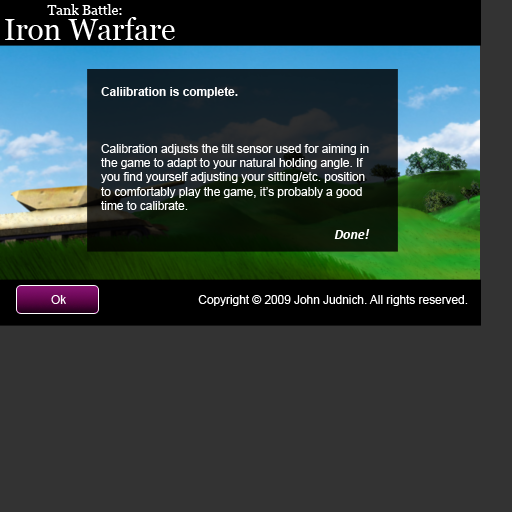
<style>
.page{position:relative;width:512px;height:512px;background:#333333}
.page>*{position:absolute;margin:0}
.t1{font:13.8px "Georgia";color:#ffffff}
.t2{font:29.6px "Georgia";color:#ffffff}
.t3{font:11.9px "ArialMT";color:#fefefe}
.t4{font:11.9px "Arial-BoldMT";color:#fefefe}
.t5{font:5.9px "Georgia";color:#000000}
.t6{font:13.8px "Calibri-BoldItalic";color:#fefefe}
.t7{font:11.9px "ArialMT";color:#ffffff}
</style>
<div class="page">
<p class="t1" style="left:47px;top:4px;width:75px;height:11px">Tank Battle:</p>
<p class="t2" style="left:5px;top:17px;width:170px;height:23px">Iron Warfare</p>
<p class="t3" style="left:101px;top:87px;width:268px;height:123px"><span class="t4">Caliibration is complete.<br><br><br><br></span>Calibration adjusts the tilt sensor used for aiming in<br>the game to adapt to your natural holding angle. If<br>you find yourself adjusting your sitting/etc. position<br>to comfortably play the game, it’s probably a good<br>time to calibrate.</p>
<p class="t5" style="left:111px;top:197px;width:8px;height:6px;opacity:0.62">JL</p>
<p class="t6" style="left:334px;top:229px;width:36px;height:10px">Done!</p>
<p class="t7" style="left:51px;top:295px;width:15px;height:9px">Ok</p>
<p class="t7" style="left:198px;top:295px;width:270px;height:11px">Copyright © 2009 John Judnich. All rights reserved.</p>
</div>
